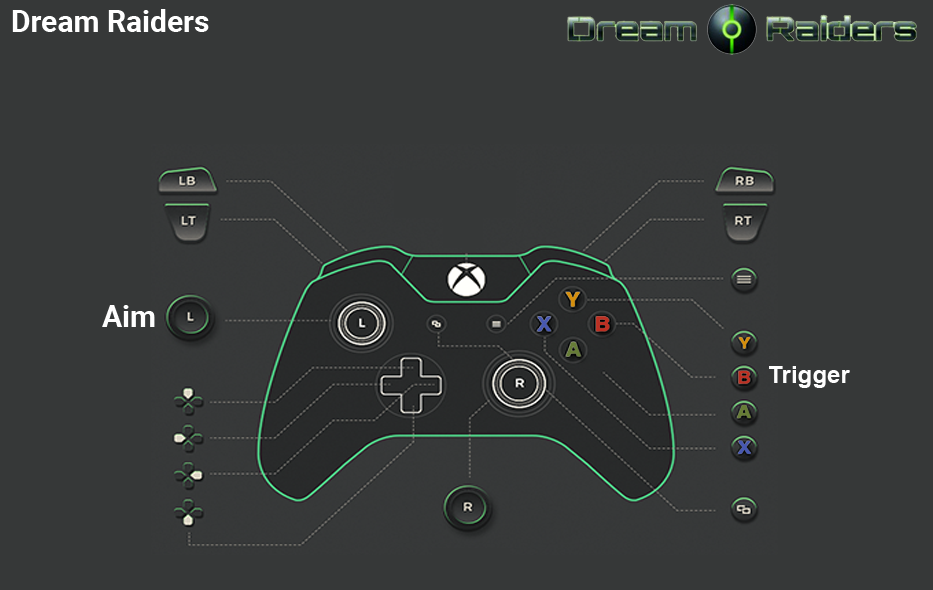
<style>
.page{position:relative;width:933px;height:590px;background:#363838}
.page>*{position:absolute;margin:0}
.t1{font:30px "Roboto-Bold";color:#ffffff}
.t2{font:30px "Roboto-Bold";color:#fefefe}
.t3{font:24px "Arial-BoldMT";color:#fefefe}
</style>
<div class="page">
<p class="t1" style="left:12px;top:9px;width:197px;height:23px">Dream Raiders</p>
<p class="t2" style="left:102px;top:305px;width:53px;height:22px">Aim</p>
<p class="t3" style="left:769px;top:366px;width:81px;height:22px">Trigger</p>
</div>
